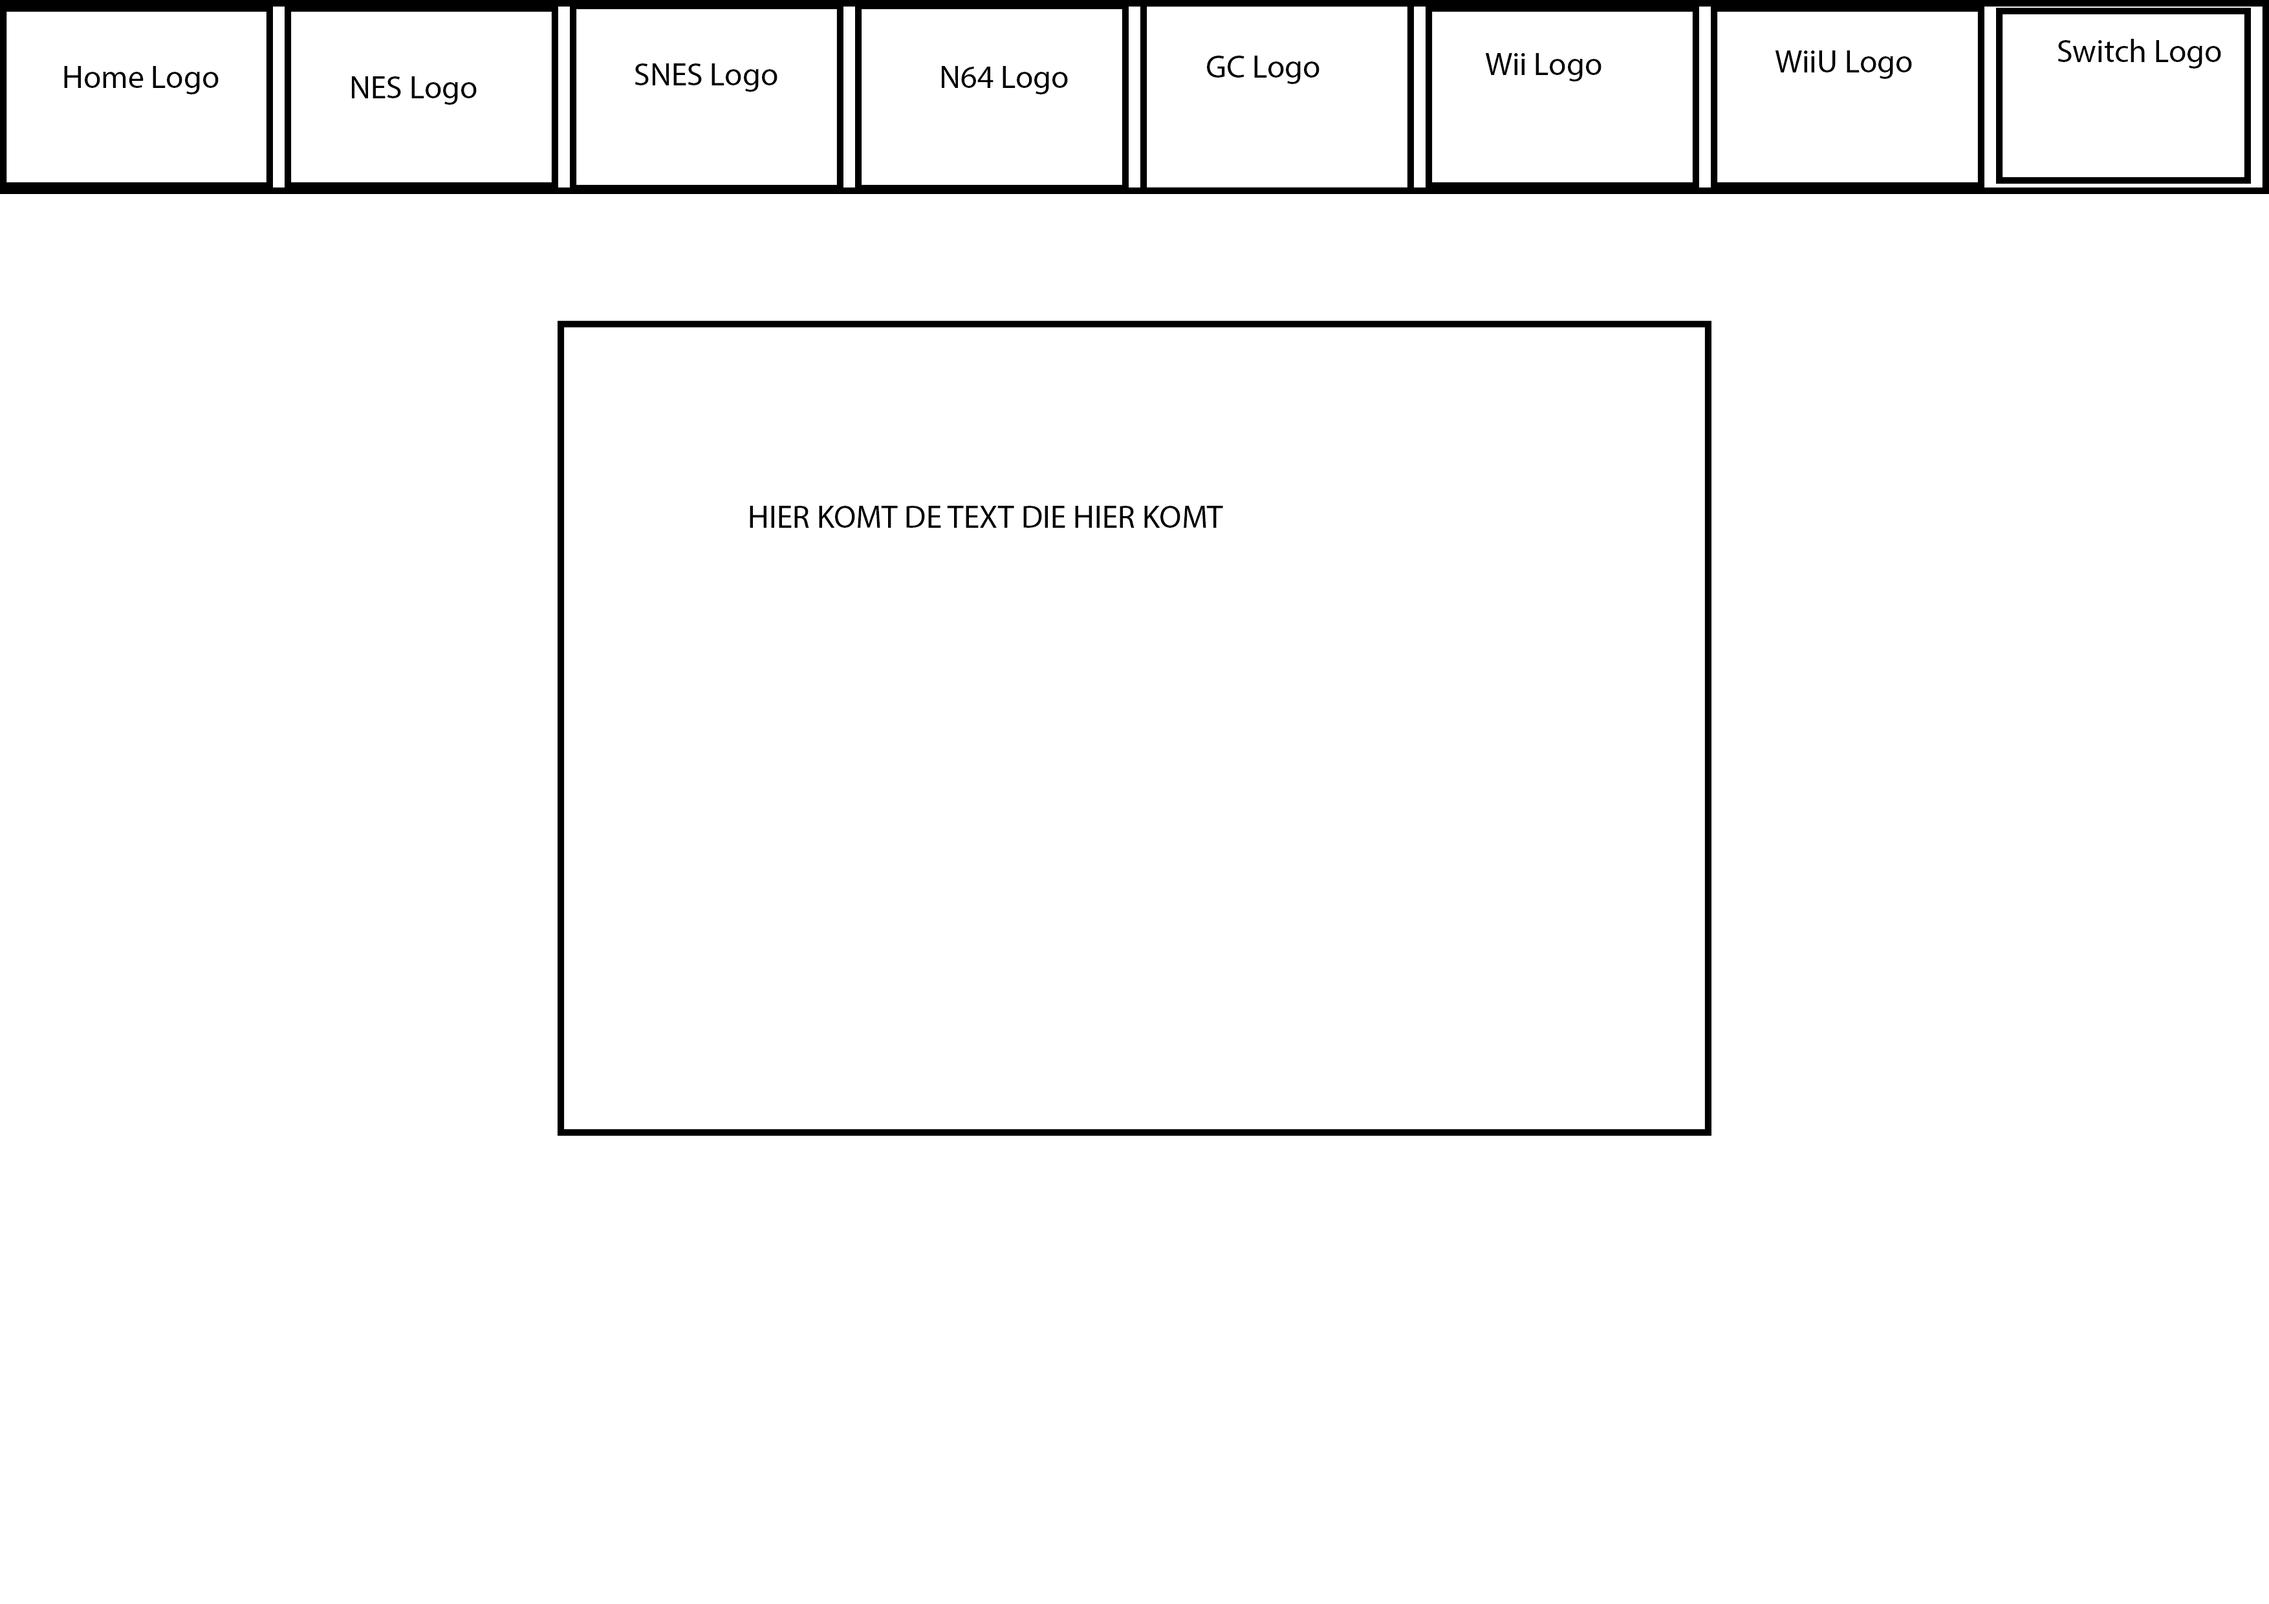
<style>
.page{position:relative;width:2269px;height:1604px;background:#ffffff}
.page>*{position:absolute;margin:0}
.t1{font:7.8px "MyriadPro-Regular";color:#000000}
</style>
<div class="page">
<p class="t1" style="left:2057px;top:39px;width:164px;height:30px">Switch Logo</p>
<p class="t1" style="left:1485px;top:53px;width:116px;height:28px">Wii Logo</p>
<p class="t1" style="left:1774px;top:50px;width:138px;height:29px">WiiU Logo</p>
<p class="t1" style="left:64px;top:66px;width:155px;height:28px">Home Logo</p>
<p class="t1" style="left:634px;top:63px;width:143px;height:29px">SNES Logo</p>
<p class="t1" style="left:942px;top:66px;width:126px;height:28px">N64 Logo</p>
<p class="t1" style="left:1207px;top:56px;width:112px;height:28px">GC Logo</p>
<p class="t1" style="left:352px;top:76px;width:125px;height:29px">NES Logo</p>
<p class="t1" style="left:749px;top:506px;width:474px;height:22px">HIER KOMT DE TEXT DIE HIER KOMT</p>
</div>
